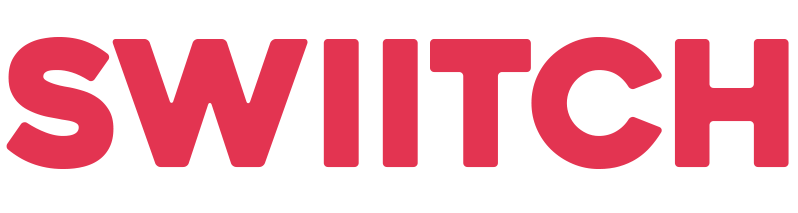
<style>
.page{position:relative;width:798px;height:213px;background:#ffffff}
.page>*{position:absolute;margin:0}
.t1{font:175px "Heavitas";color:#e33451}
</style>
<div class="page">
<p class="t1" style="left:6px;top:37px;width:783px;height:132px">SWIITCH</p>
</div>
